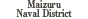
<style>
.page{position:relative;width:88px;height:19px;background:#ffffff}
.page>*{position:absolute;margin:0}
.t1{font:10px/9px "RyuminPro-ExBold";letter-spacing:-0.04em;color:#4c4843;scale:0.9 1}
</style>
<div class="page">
<p class="t1" style="left:16px;top:0px;width:56px;height:18px;text-align:center">Maizuru<br>Naval District</p>
</div>
